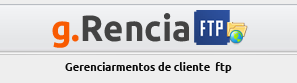
<style>
.page{position:relative;width:297px;height:83px;background:#eeeeee}
.page>*{position:absolute;margin:0}
.t1{font:36.6px "Ubuntu-Bold";color:#434343;scale:0.96 1}
.t2{font:36.6px "Ubuntu-Bold";color:#f85b02;scale:0.96 1}
.t3{font:11px "Ubuntu-Bold";color:#0a0a0a}
</style>
<div class="page">
<p class="t1" style="left:52px;top:13px;width:137px;height:35px"><span class="t2">g.</span>Rencia</p>
<p class="t3" style="left:65px;top:62px;width:167px;height:11px">Gerenciarmentos de cliente  ftp</p>
</div>
